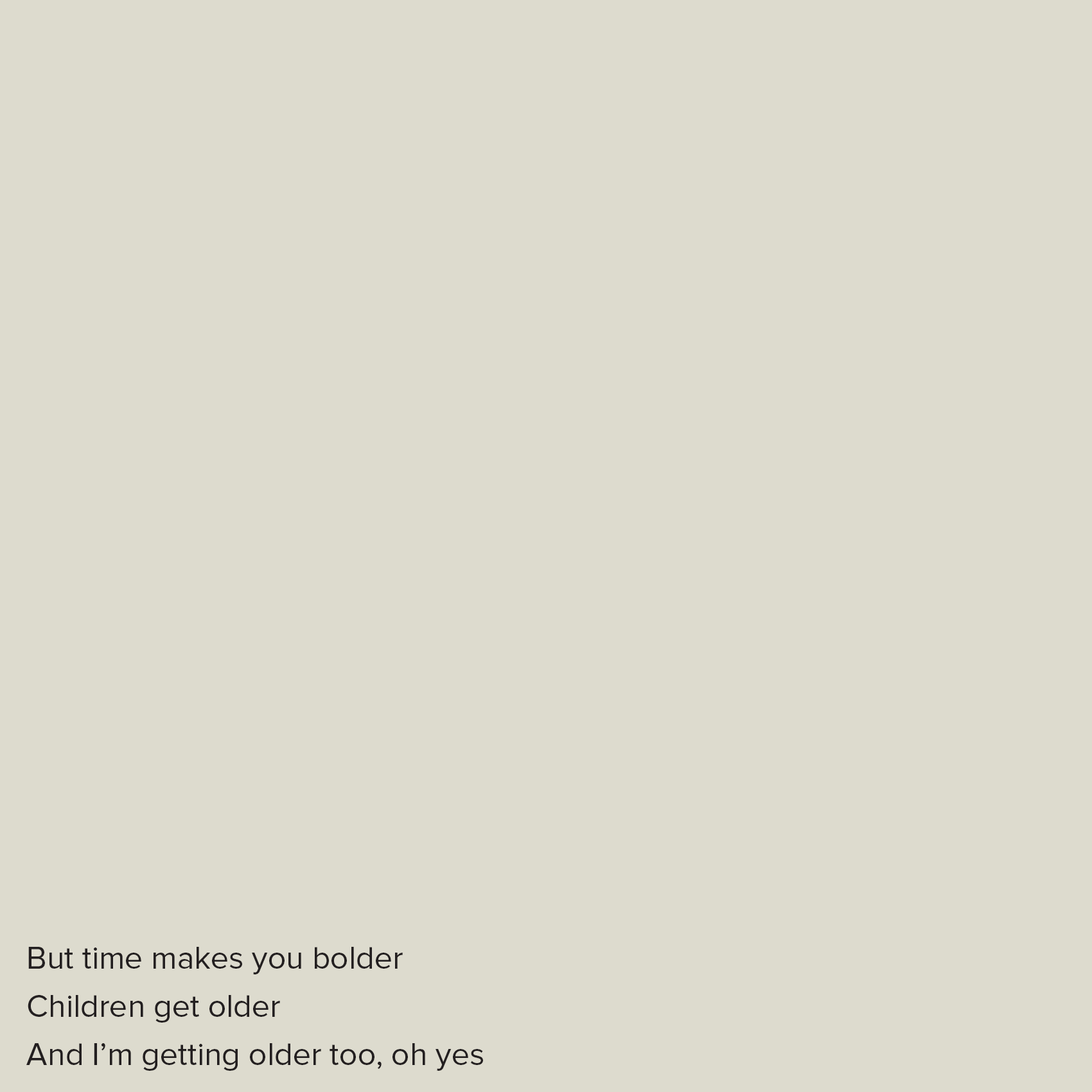
<style>
.page{position:relative;width:1092px;height:1092px;background:#dddbce}
.page>*{position:absolute;margin:0}
.t1{font:32.1px/48.2px "ProximaNova-Regular";color:#231f20}
</style>
<div class="page">
<p class="t1" style="left:26px;top:947px;width:457px;height:124px">But time makes you bolder<br>Children get older<br>And I’m getting older too, oh yes</p>
</div>
